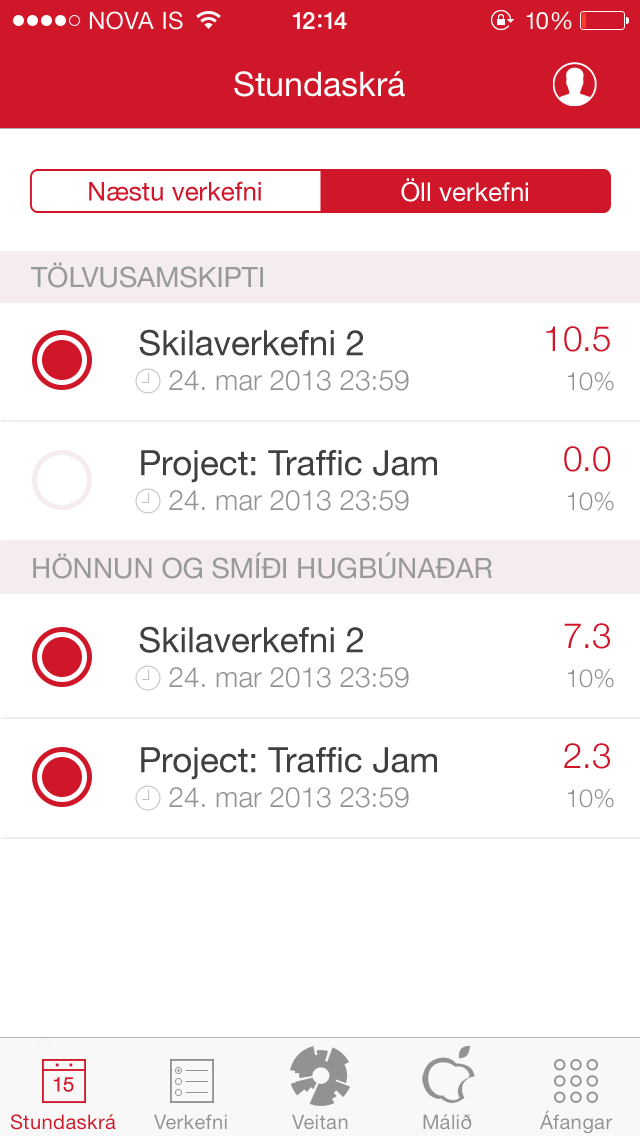
<style>
.page{position:relative;width:640px;height:1136px;background:#ffffff}
.page>*{position:absolute;margin:0}
.t1{font:26px "HelveticaNeue";color:#d01729}
.t2{font:26px "HelveticaNeue";color:#ffffff}
.t3{font:28px "HelveticaNeue";color:#99999a}
.t4{font:35px "HelveticaNeue";color:#404041}
.t5{font:35px "HelveticaNeue-Light";color:#d01729}
.t6{font:28px "HelveticaNeue-Light";color:#929293}
.t7{font:25px "HelveticaNeue-Light";color:#929293}
</style>
<div class="page">
<p class="t1" style="left:89px;top:181px;width:172px;height:20px">Næstu verkefni</p>
<p class="t2" style="left:401px;top:178px;width:127px;height:24px">Öll verkefni</p>
<p class="t3" style="left:31px;top:262px;width:232px;height:26px">TÖLVUSAMSKIPTI</p>
<p class="t4" style="left:139px;top:329px;width:224px;height:27px">Skilaverkefni 2</p>
<p class="t5" style="left:546px;top:326px;width:64px;height:26px">10.5</p>
<p class="t6" style="left:169px;top:370px;width:240px;height:21px">24. mar 2013 23:59</p>
<p class="t7" style="left:568px;top:371px;width:46px;height:20px">10%</p>
<p class="t5" style="left:564px;top:446px;width:47px;height:26px">0.0</p>
<p class="t4" style="left:141px;top:450px;width:296px;height:33px">Project: Traffic Jam</p>
<p class="t6" style="left:169px;top:490px;width:240px;height:21px">24. mar 2013 23:59</p>
<p class="t7" style="left:568px;top:491px;width:46px;height:20px">10%</p>
<p class="t3" style="left:33px;top:552px;width:459px;height:27px">HÖNNUN OG SMÍÐI HUGBÚNAÐAR</p>
<p class="t4" style="left:139px;top:626px;width:224px;height:27px">Skilaverkefni 2</p>
<p class="t5" style="left:564px;top:623px;width:46px;height:26px">7.3</p>
<p class="t6" style="left:169px;top:667px;width:240px;height:21px">24. mar 2013 23:59</p>
<p class="t7" style="left:568px;top:668px;width:46px;height:20px">10%</p>
<p class="t4" style="left:141px;top:747px;width:296px;height:33px">Project: Traffic Jam</p>
<p class="t5" style="left:564px;top:743px;width:46px;height:26px">2.3</p>
<p class="t6" style="left:169px;top:787px;width:240px;height:21px">24. mar 2013 23:59</p>
<p class="t7" style="left:568px;top:788px;width:46px;height:20px">10%</p>
</div>
